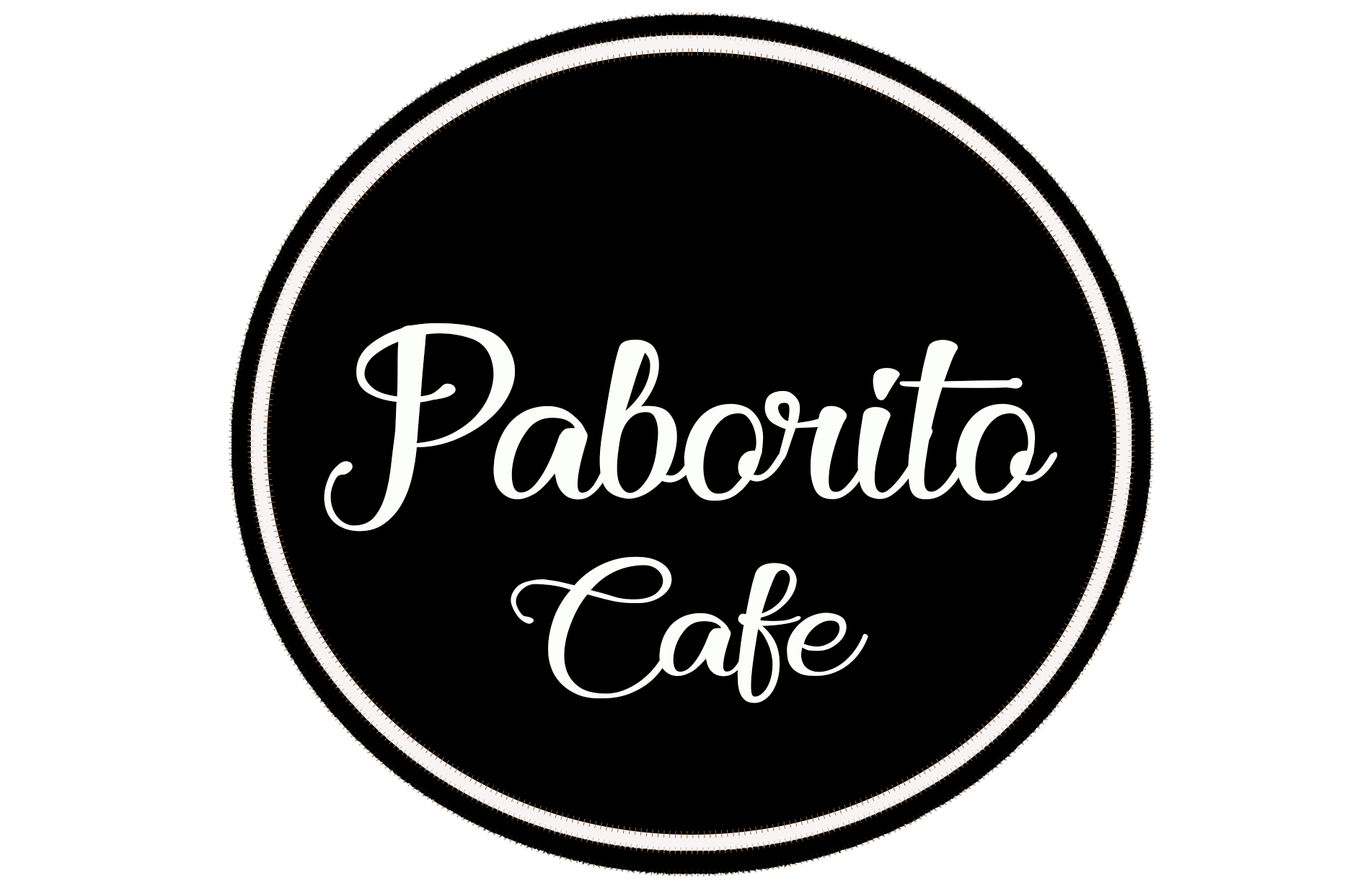
<style>
.page{position:relative;width:1350px;height:883px;background:#ffffff}
.page>*{position:absolute;margin:0}
.t1{font:374.7px "Athena-of-theOcean";color:#fcfff9;scale:1.15 1}
.t2{font:253.3px "Athena-of-theOcean";color:#fcfff9;scale:1.29 1}
</style>
<div class="page">
<p class="t1" style="left:324px;top:323px;width:734px;height:209px">Paborito</p>
<p class="t2" style="left:511px;top:556px;width:358px;height:147px">Cafe</p>
</div>
